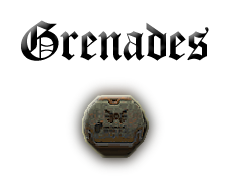
<style>
.page{position:relative;width:230px;height:195px;background:#ffffff}
.page>*{position:absolute;margin:0}
.t1{font:60px "Oldchristmas-Regular";color:#000000}
</style>
<div class="page">
<p class="t1" style="left:21px;top:20px;width:188px;height:41px">Grenades</p>
</div>
